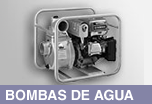
<style>
.page{position:relative;width:152px;height:104px}
.page>*{position:absolute;margin:0}
.t1{font:14px "Helvetica-Bold";color:#ffffff}
</style>
<div class="page">
<p class="t1" style="left:6px;top:89px;width:128px;height:12px">BOMBAS DE AGUA</p>
</div>
